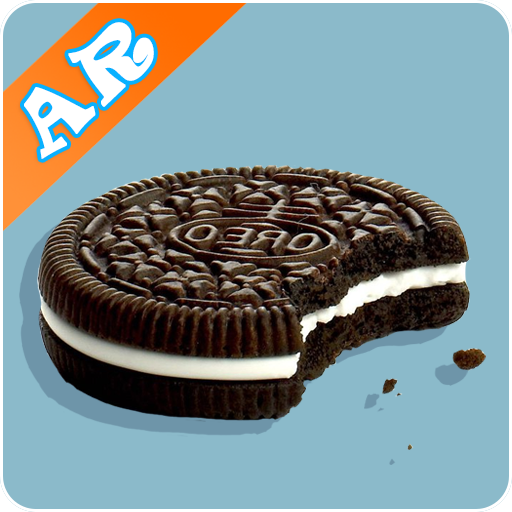
<style>
.page{position:relative;width:512px;height:512px;background:#8bbaca}
.page>*{position:absolute;margin:0}
.t1{font:73.8px "Ravie";letter-spacing:0.14em;color:#ffffff;font-weight:bold}
</style>
<div class="page">
<p class="t1" style="left:24px;top:22px;width:130px;height:137px;rotate:-43deg">AR</p>
</div>
